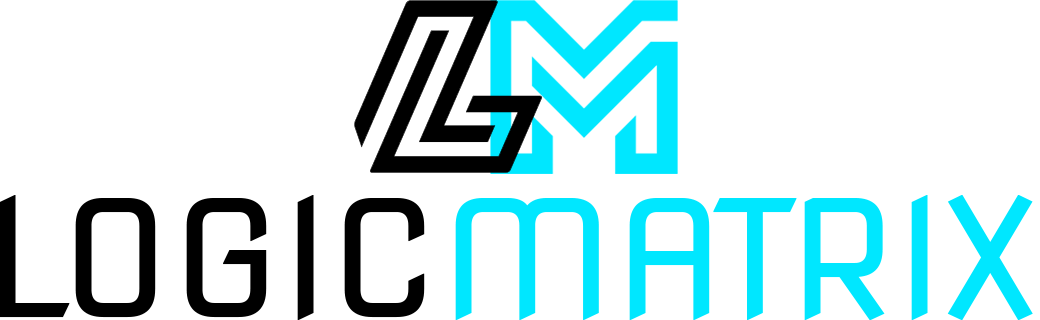
<style>
.page{position:relative;width:1040px;height:320px;background:#ffffff}
.page>*{position:absolute;margin:0}
.t1{font:161px "NovaSquare";color:#00e7ff}
.t2{font:161px "NovaSquare";color:#000000}
</style>
<div class="page">
<p class="t1" style="left:0px;top:195px;width:1033px;height:125px"><span class="t2">LOGIC</span>MATRIX</p>
</div>
